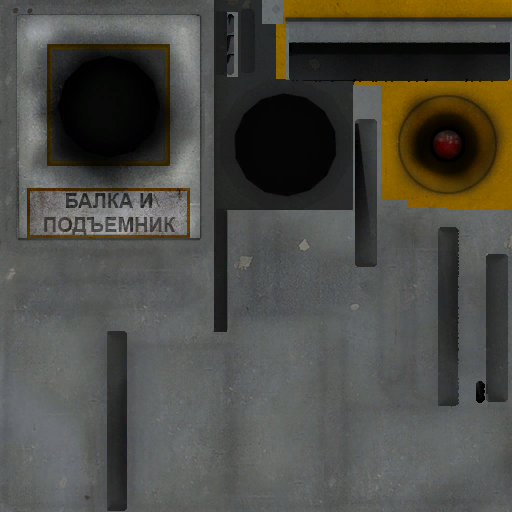
<style>
.page{position:relative;width:512px;height:512px}
.page>*{position:absolute;margin:0}
.t1{font:20px/24px "Arial-BoldMT";color:#3c3b3a}
</style>
<div class="page">
<p class="t1" style="left:44px;top:193px;width:131px;height:42px;text-align:center">БАЛКА И<br>ПОДЪЕМНИК</p>
</div>
